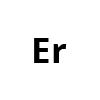
<style>
.page{position:relative;width:100px;height:100px;background:#ffffff}
.page>*{position:absolute;margin:0}
.t1{font:35px "OpenSans-Bold";color:#000000}
</style>
<div class="page">
<p class="t1" style="left:34px;top:38px;width:33px;height:25px">Er</p>
</div>
